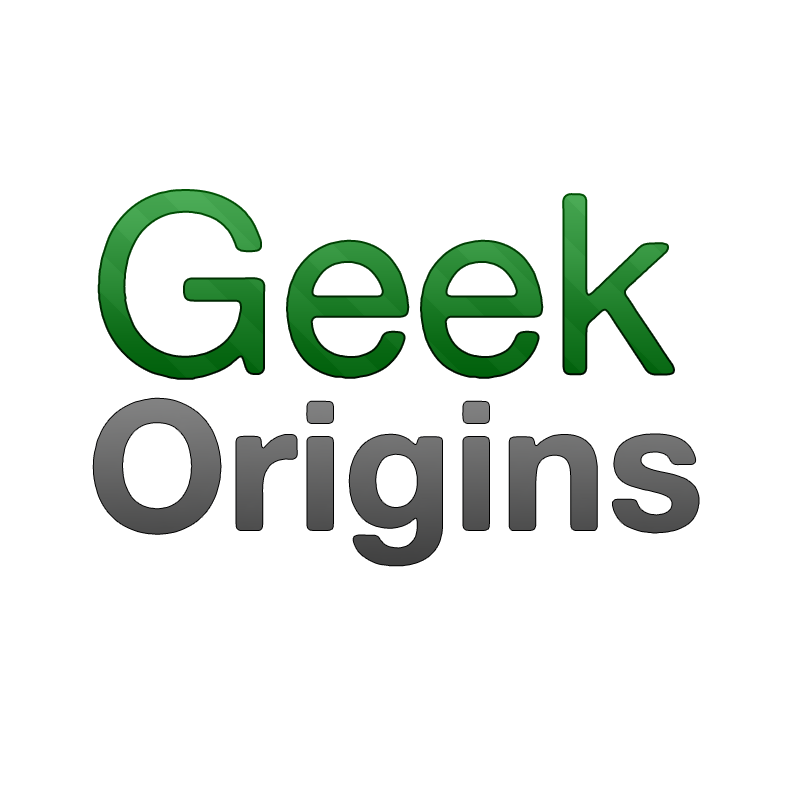
<style>
.page{position:relative;width:800px;height:800px;background:#ffffff}
.page>*{position:absolute;margin:0}
.t1{font:250px "AlteHaasGrotesk"}
.t2{font:180px "AlteHaasGrotesk_Bold";color:#626262}
</style>
<div class="page">
<p class="t1" style="left:99px;top:191px;width:574px;height:187px">Geek</p>
<p class="t2" style="left:93px;top:398px;width:606px;height:168px">Origins</p>
</div>
